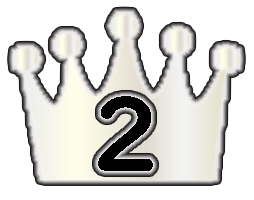
<style>
.page{position:relative;width:254px;height:200px;background:#ffffff}
.page>*{position:absolute;margin:0}
.t1{font:100px "UDDigiKyokashoNP-B";color:#000000}
</style>
<div class="page">
<p class="t1" style="left:98px;top:96px;width:55px;height:75px;rotate:1deg">2</p>
</div>
